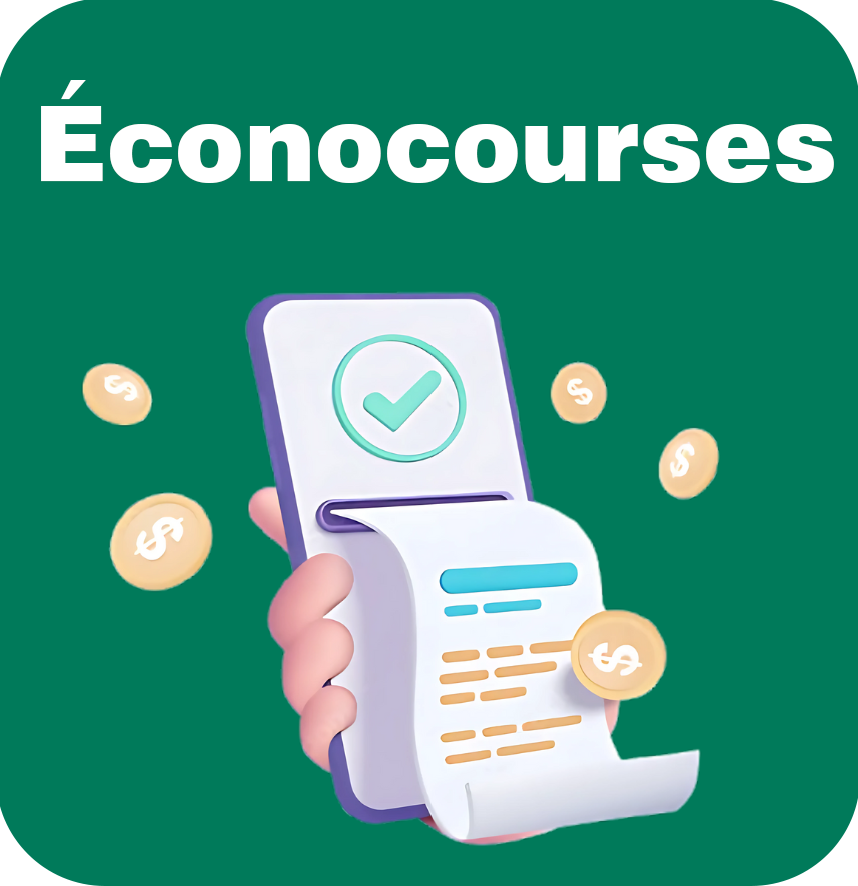
<style>
.page{position:relative;width:858px;height:886px;background:#007a5a}
.page>*{position:absolute;margin:0}
.t1{font:104.4px "Swiss721BT-Black";color:#ffffff}
</style>
<div class="page">
<p class="t1" style="left:41px;top:80px;width:793px;height:103px">Éconocourses</p>
</div>
